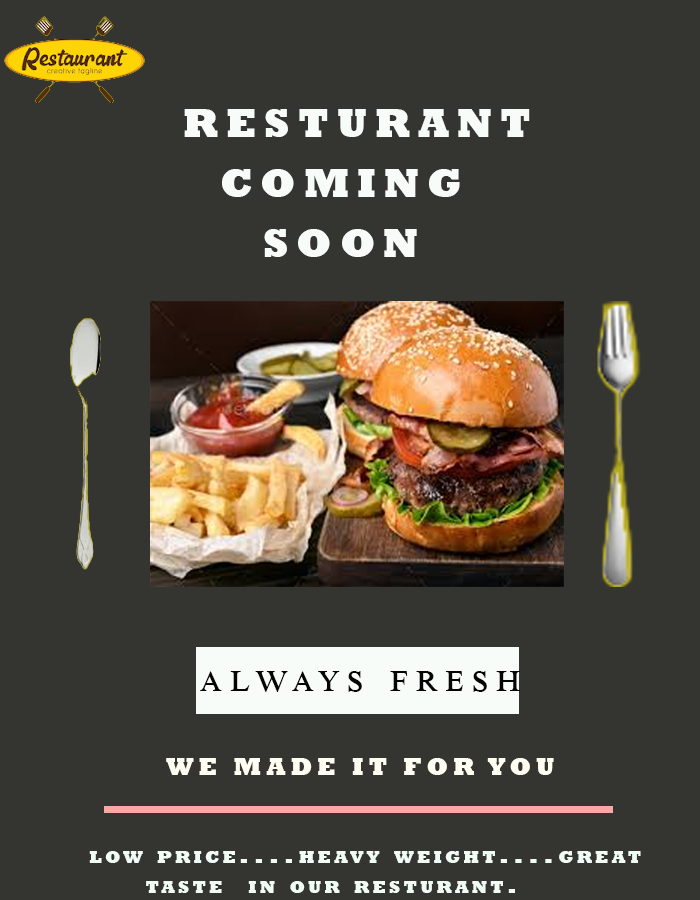
<style>
.page{position:relative;width:700px;height:900px;background:#343430}
.page>*{position:absolute;margin:0}
.t1{font:58.3px "Rockwell-ExtraBold";letter-spacing:0.2em;color:#f8fcf9;font-variant:small-caps}
.t2{font:41.7px "TimesNewRomanPSMT";letter-spacing:0.2em;color:#040404;font-variant:small-caps}
.t3{font:25px "Rockwell-ExtraBold";letter-spacing:0.2em;color:#fffef2;font-variant:small-caps}
.t4{font:25px "Rockwell-ExtraBold";letter-spacing:0.2em;color:#f1fcf5;font-variant:small-caps}
</style>
<div class="page">
<p class="t1" style="left:184px;top:109px;width:346px;height:28px">resturant</p>
<p class="t1" style="left:222px;top:169px;width:238px;height:28px">coming</p>
<p class="t1" style="left:264px;top:229px;width:153px;height:28px">soon</p>
<p class="t2" style="left:200px;top:671px;width:320px;height:21px">always fresh</p>
<p class="t3" style="left:166px;top:758px;width:388px;height:17px">WE MADE IT FOR YOU</p>
<p class="t4" style="left:89px;top:851px;width:552px;height:42px">low price....heavy weight....great<br>     taste  in our resturant.</p>
</div>
